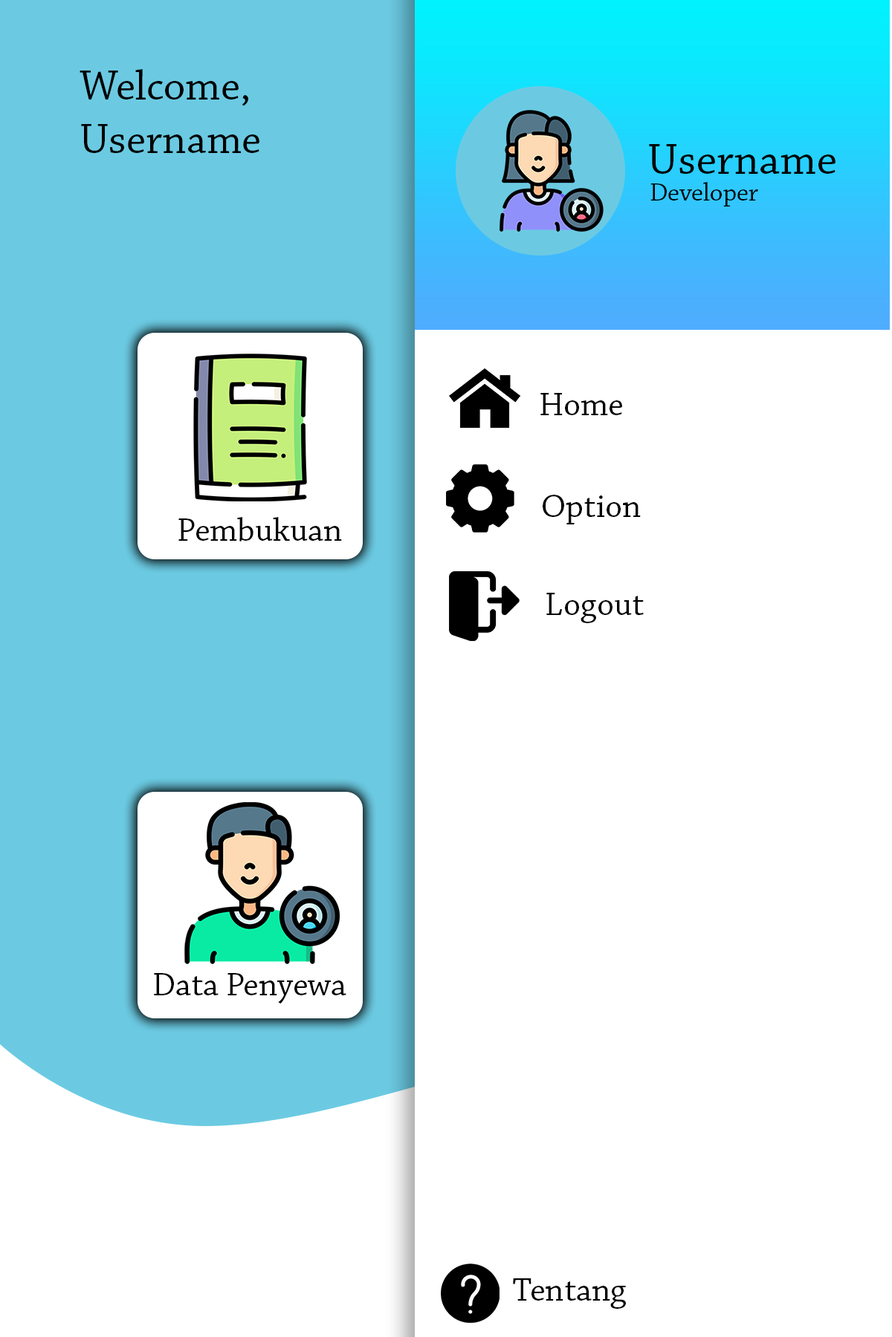
<style>
.page{position:relative;width:892px;height:1337px;background:#ffffff}
.page>*{position:absolute;margin:0}
.t1{font:43.3px "ChaparralPro-Regular";color:#000101}
.t2{font:45.3px "ChaparralPro-Regular";color:#000101}
.t3{font:26.2px "ChaparralPro-Regular";color:#000101}
.t4{font:34.1px "ChaparralPro-Regular";color:#000101}
.t5{font:34px "ChaparralPro-Regular";color:#000101}
</style>
<div class="page">
<p class="t1" style="left:80px;top:69px;width:168px;height:37px">Welcome,</p>
<p class="t1" style="left:81px;top:124px;width:178px;height:29px">Username</p>
<p class="t2" style="left:649px;top:144px;width:186px;height:30px">Username</p>
<p class="t3" style="left:650px;top:182px;width:108px;height:25px">Developer</p>
<p class="t4" style="left:540px;top:393px;width:82px;height:22px">Home</p>
<p class="t4" style="left:542px;top:495px;width:98px;height:30px">Option</p>
<p class="t5" style="left:178px;top:517px;width:164px;height:25px">Pembukuan</p>
<p class="t4" style="left:546px;top:593px;width:97px;height:30px">Logout</p>
<p class="t4" style="left:154px;top:973px;width:192px;height:31px">Data Penyewa</p>
<p class="t4" style="left:513px;top:1279px;width:113px;height:30px">Tentang</p>
</div>
